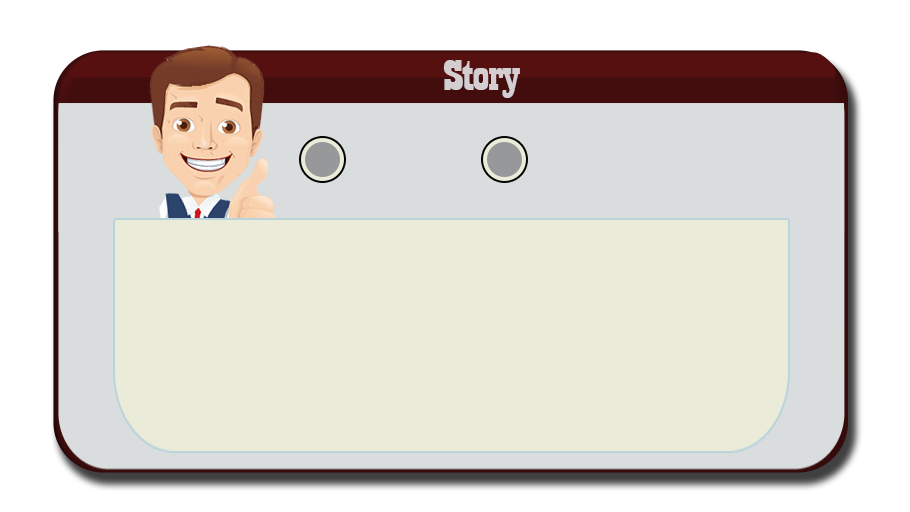
<style>
.page{position:relative;width:910px;height:512px;background:#eaebd8}
.page>*{position:absolute;margin:0}
.t1{font:44.6px "Playbill";letter-spacing:-0.025em;color:#d3ced1;scale:1.61 1}
</style>
<div class="page">
<p class="t1" style="left:443px;top:60px;width:77px;height:38px">Story</p>
</div>
